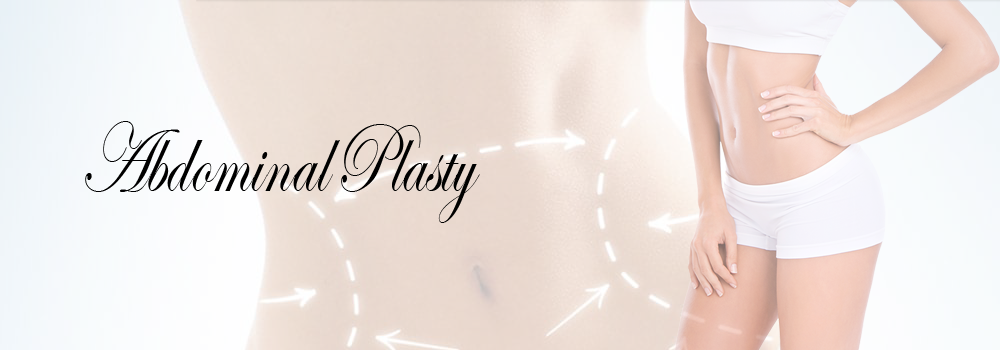
<style>
.page{position:relative;width:1000px;height:350px}
.page>*{position:absolute;margin:0}
.t1{font:100.9px "EdwardianScriptITC";color:#000000;scale:0.72 1}
</style>
<div class="page">
<p class="t1" style="left:85px;top:121px;width:255px;height:71px">Abdominal</p>
<p class="t1" style="left:341px;top:124px;width:139px;height:99px">Plasty</p>
</div>
